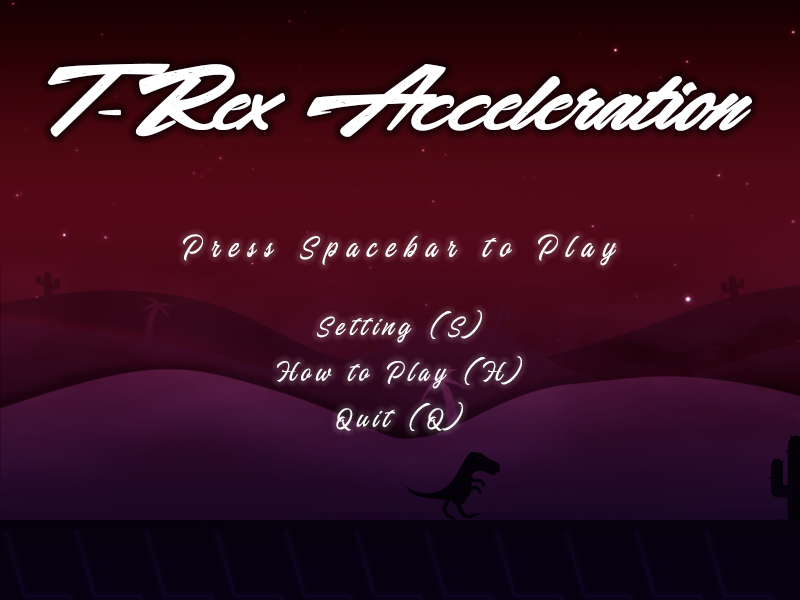
<style>
.page{position:relative;width:800px;height:600px}
.page>*{position:absolute;margin:0}
.t1{font:179.2px "Acceleration-&-Reaction";color:#ffffff}
.t2{font:37.5px "Sangharia";letter-spacing:0.26em;color:#ffffff}
.t3{font:33.3px/45.9px "Sangharia";letter-spacing:0.16em;color:#ffffff}
</style>
<div class="page">
<p class="t1" style="left:47px;top:63px;width:705px;height:74px">T-Rex Acceleration</p>
<p class="t2" style="left:183px;top:234px;width:433px;height:32px">Press Spacebar to Play</p>
<p class="t3" style="left:277px;top:310px;width:245px;height:121px;text-align:center">Setting (S)<br>How to Play (H)<br>Quit (Q)</p>
</div>
